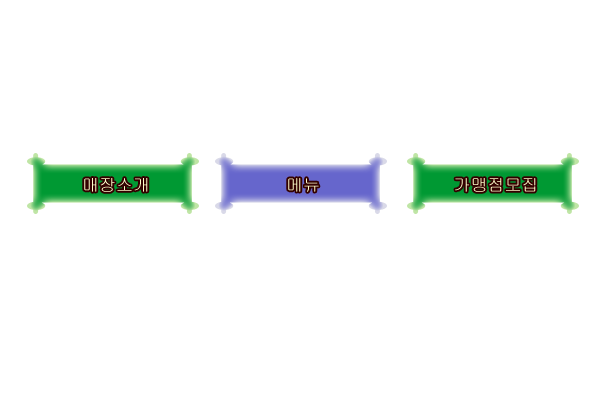
<style>
.page{position:relative;width:600px;height:400px;background:#ffffff}
.page>*{position:absolute;margin:0}
.t1{font:17px "Gulim";color:#ffffcc}
.t2{font:17px "Gulim"}
</style>
<div class="page">
<p class="t1" style="left:84px;top:178px;width:64px;height:14px">매장소개</p>
<p class="t1" style="left:288px;top:178px;width:31px;height:14px">메뉴</p>
<p class="t2" style="left:455px;top:178px;width:81px;height:14px">가맹점모집</p>
</div>
